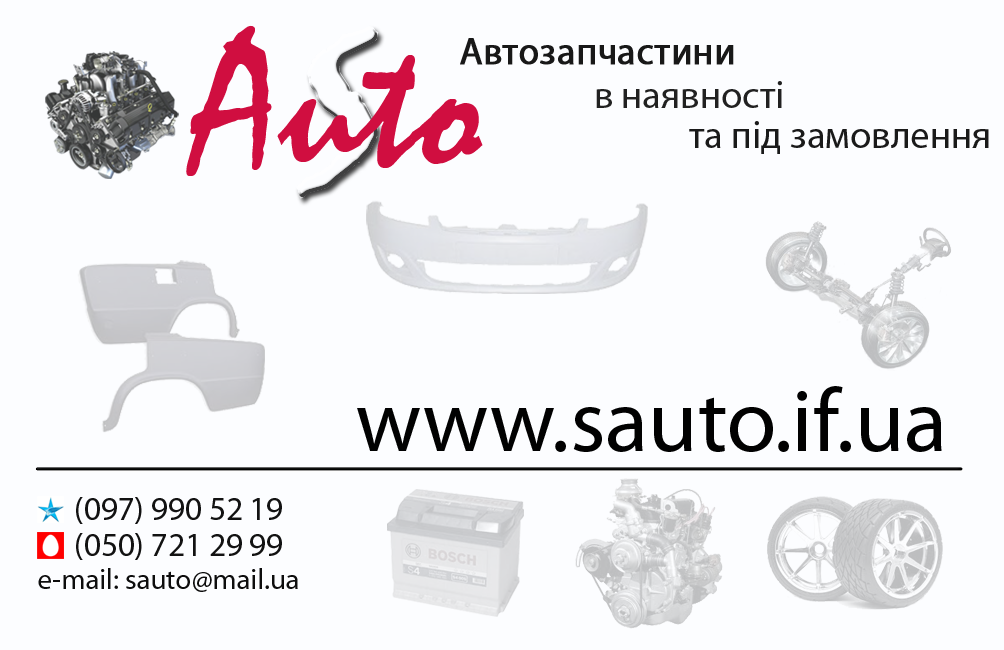
<style>
.page{position:relative;width:1004px;height:650px;background:#fcfdff}
.page>*{position:absolute;margin:0}
.t1{font:195.5px "Mistral";color:#d00e40}
.t2{font:37.5px "MyriadPro-Regular";color:#181818;font-weight:bold}
.t3{font:38.6px "MyriadPro-Regular";color:#212121}
.t4{font:38.6px "MyriadPro-Regular";color:#1a1a1a}
.t5{font:89.5px "MyriadPro-Regular";color:#010101}
.t6{font:33px/36.2px "MyriadPro-Regular";color:#121212}
.t7{font:28.8px "MyriadPro-Regular";color:#0d0d0d}
.t8{font:33px "MyriadPro-Regular";color:#0d0d0d}
</style>
<div class="page">
<p class="t1" style="left:186px;top:25px;width:297px;height:151px">Auto</p>
<p class="t2" style="left:460px;top:38px;width:274px;height:27px">Автозапчастини</p>
<p class="t3" style="left:596px;top:81px;width:186px;height:27px">в наявності</p>
<p class="t4" style="left:689px;top:121px;width:300px;height:33px">та під замовлення</p>
<p class="t5" style="left:357px;top:386px;width:585px;height:66px">www.sauto.if.ua</p>
<p class="t6" style="left:76px;top:497px;width:206px;height:63px">(097) 990 52 19<br>(050) 721 29 99</p>
<p class="t7" style="left:38px;top:568px;width:260px;height:24px"><span class="t8"><br></span>e-mail: sauto@mail.ua</p>
</div>
